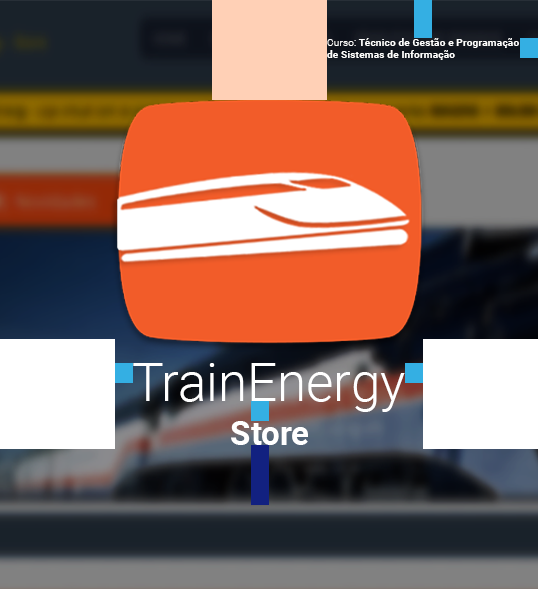
<style>
.page{position:relative;width:538px;height:589px}
.page>*{position:absolute;margin:0}
.t1{font:10.4px "Roboto-Bold";color:#ffffff}
.t2{font:10.4px "Roboto-Light";color:#ffffff}
.t3{font:52.8px "Roboto-Light";color:#ffffff}
.t4{font:32.9px "Roboto-Bold";color:#ffffff}
</style>
<div class="page">
<p class="t1" style="left:327px;top:38px;width:192px;height:22px"><span class="t2">Curso: </span>Técnico de Gestão e Programação  de Sistemas de Informação</p>
<p class="t3" style="left:133px;top:363px;width:272px;height:49px">TrainEnergy</p>
<p class="t4" style="left:231px;top:421px;width:77px;height:24px">Store</p>
</div>
